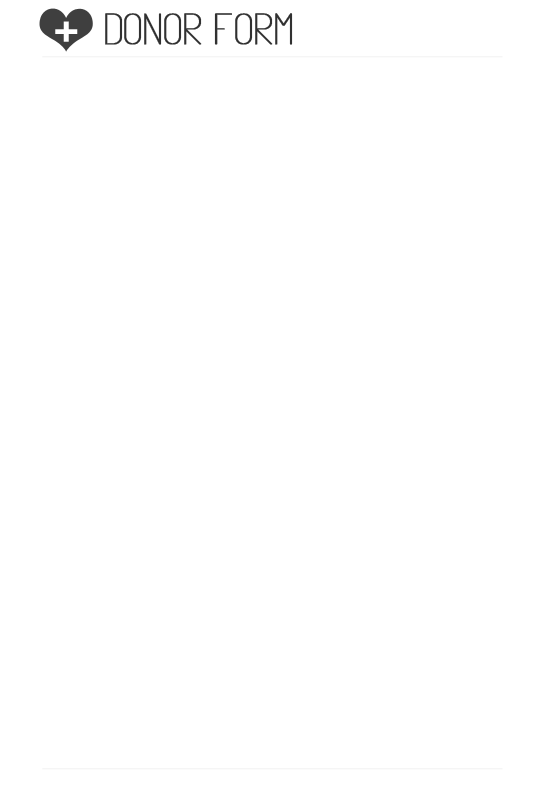
<style>
.page{position:relative;width:544px;height:788px;background:#ffffff}
.page>*{position:absolute;margin:0}
.t1{font:43.8px "Infinity";letter-spacing:-0.02em;color:#323232;font-weight:bold}
.t2{font:46.3px "LeagueGothic-Regular";letter-spacing:-0.02em;color:#ffffff;font-weight:bold}
</style>
<div class="page">
<p class="t1" style="left:105px;top:13px;width:188px;height:32px">DONOR FORM</p>
<p class="t2" style="left:55px;top:21px;width:23px;height:21px">+</p>
</div>
